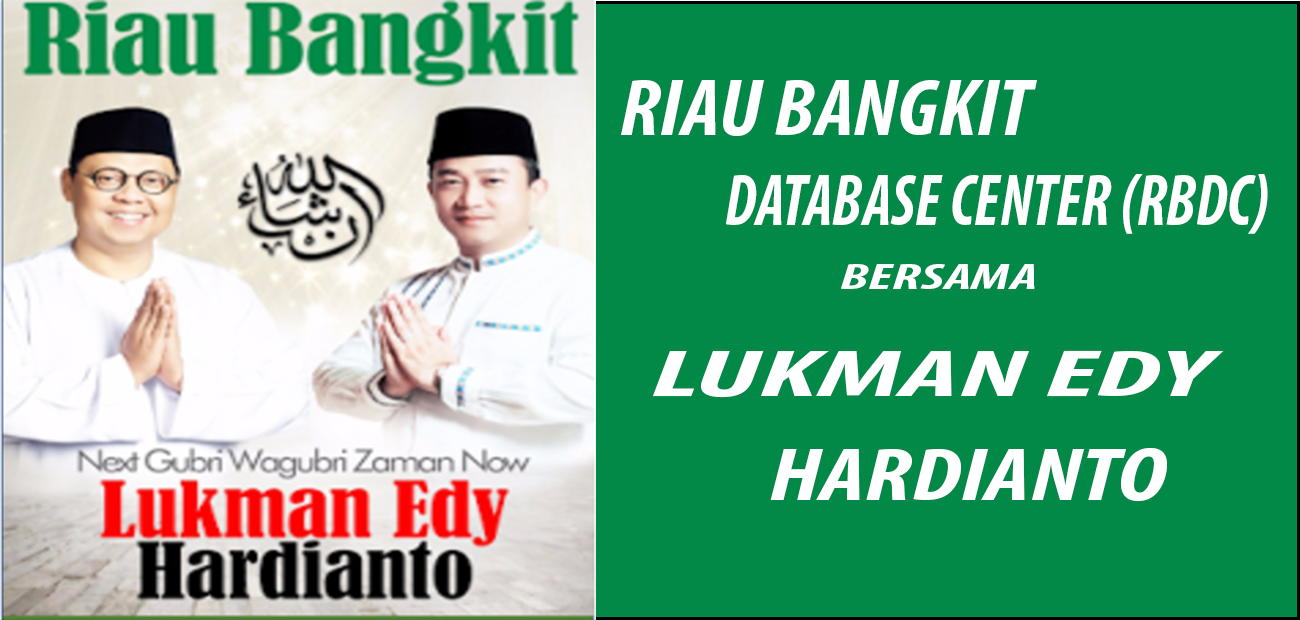
<style>
.page{position:relative;width:1300px;height:620px;background:#028847}
.page>*{position:absolute;margin:0}
.t1{font:81px "MyriadPro-BoldCondIt";color:#ffffff;scale:1.08 1}
.t2{font:73.6px "MyriadPro-BoldCondIt";color:#ffffff;scale:0.88 1}
.t3{font:35.9px "MyriadPro-BoldCondIt";color:#ffffff;scale:1.72 1}
.t4{font:67.2px "MyriadPro-BoldCondIt";color:#ffffff;scale:1.97 1}
.t5{font:76.4px "MyriadPro-BoldCondIt";color:#ffffff;scale:1.33 1}
</style>
<div class="page">
<p class="t1" style="left:621px;top:80px;width:416px;height:56px">RIAU BANGKIT</p>
<p class="t2" style="left:726px;top:174px;width:542px;height:60px">DATABASE CENTER (RBDC)</p>
<p class="t3" style="left:841px;top:264px;width:194px;height:25px">BERSAMA</p>
<p class="t4" style="left:653px;top:350px;width:571px;height:48px">LUKMAN EDY</p>
<p class="t5" style="left:770px;top:447px;width:397px;height:55px">HARDIANTO</p>
</div>
